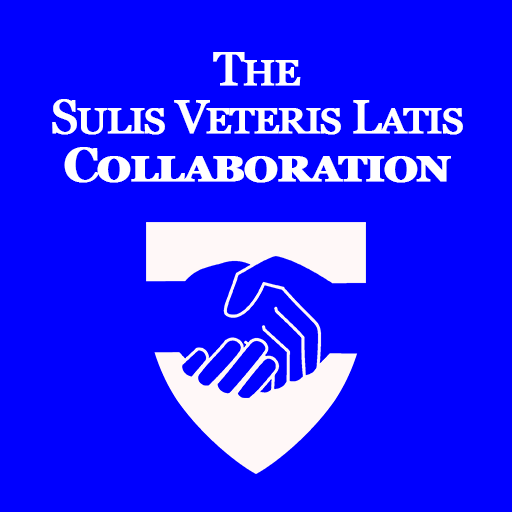
<style>
.page{position:relative;width:512px;height:512px;background:#0000ff}
.page>*{position:absolute;margin:0}
.t1{font:48px/48px "Georgia";letter-spacing:-0.05em;color:#ffffff;font-variant:small-caps;font-weight:bold}
.t2{font:48px/48px "Georgia-Bold";letter-spacing:-0.05em;color:#ffffff;font-variant:small-caps;font-weight:bold}
</style>
<div class="page">
<p class="t1" style="left:52px;top:52px;width:411px;height:131px;text-align:center">The<br>Sulis Veteris Latis<br><span class="t2">Collaboration</span></p>
</div>
